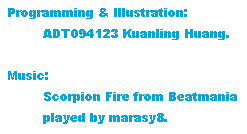
<style>
.page{position:relative;width:247px;height:134px;background:#ffffff}
.page>*{position:absolute;margin:0}
.t1{font:12px "Arial-Black";color:#06a4df}
</style>
<div class="page">
<p class="t1" style="left:8px;top:8px;width:229px;height:116px">Programming &amp; Illustration:<br> ADT094123 Kuanling Huang.<br><br>Music:<br> Scorpion Fire from Beatmania<br> played by marasy8.</p>
</div>
